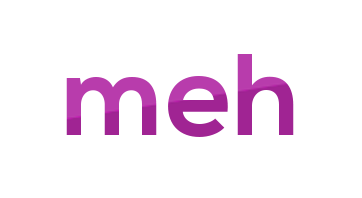
<style>
.page{position:relative;width:362px;height:198px;background:#ffffff}
.page>*{position:absolute;margin:0}
.t1{font:116.2px "NexaBold"}
</style>
<div class="page">
<p class="t1" style="left:66px;top:54px;width:228px;height:83px">meh</p>
</div>
